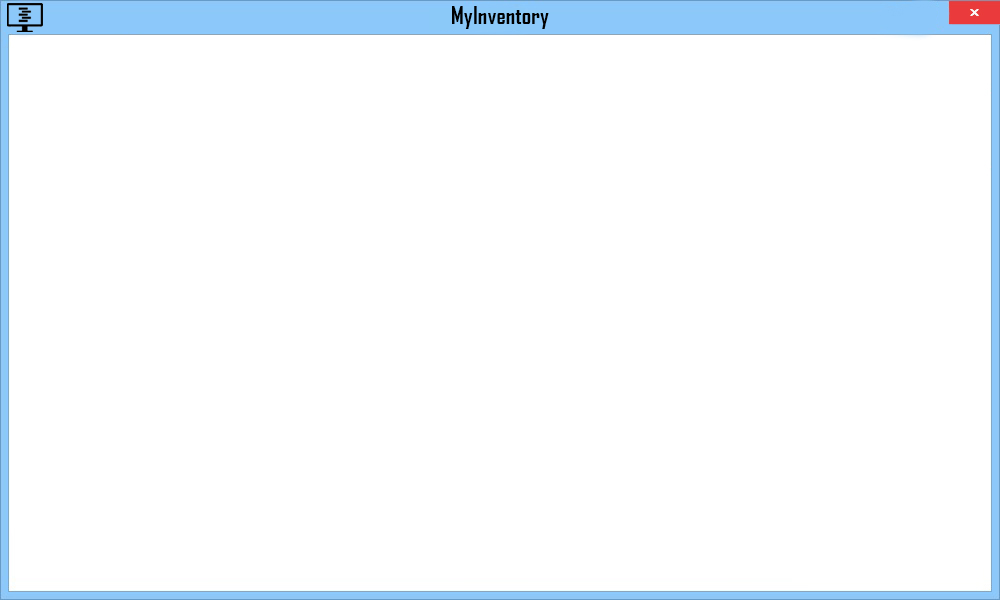
<style>
.page{position:relative;width:1000px;height:600px;background:#ffffff}
.page>*{position:absolute;margin:0}
.t1{font:23.3px "AgencyFB-Bold";color:#000000}
</style>
<div class="page">
<p class="t1" style="left:452px;top:6px;width:97px;height:23px">MyInventory</p>
</div>
